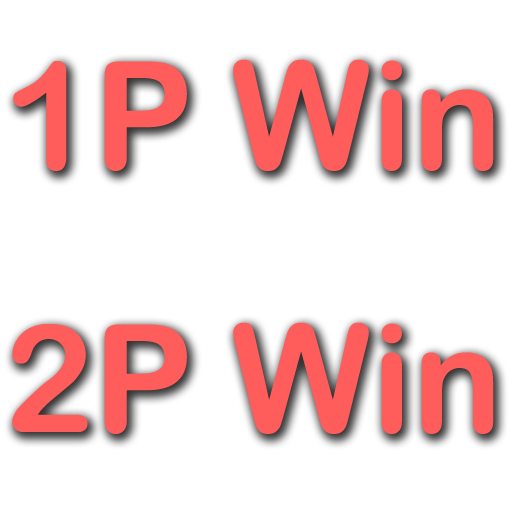
<style>
.page{position:relative;width:512px;height:512px;background:#ffffff}
.page>*{position:absolute;margin:0}
.t1{font:150px "ArialRoundedMTBold";color:#ff5c5c}
</style>
<div class="page">
<p class="t1" style="left:13px;top:59px;width:481px;height:112px">1P Win</p>
<p class="t1" style="left:12px;top:322px;width:482px;height:112px">2P Win</p>
</div>
